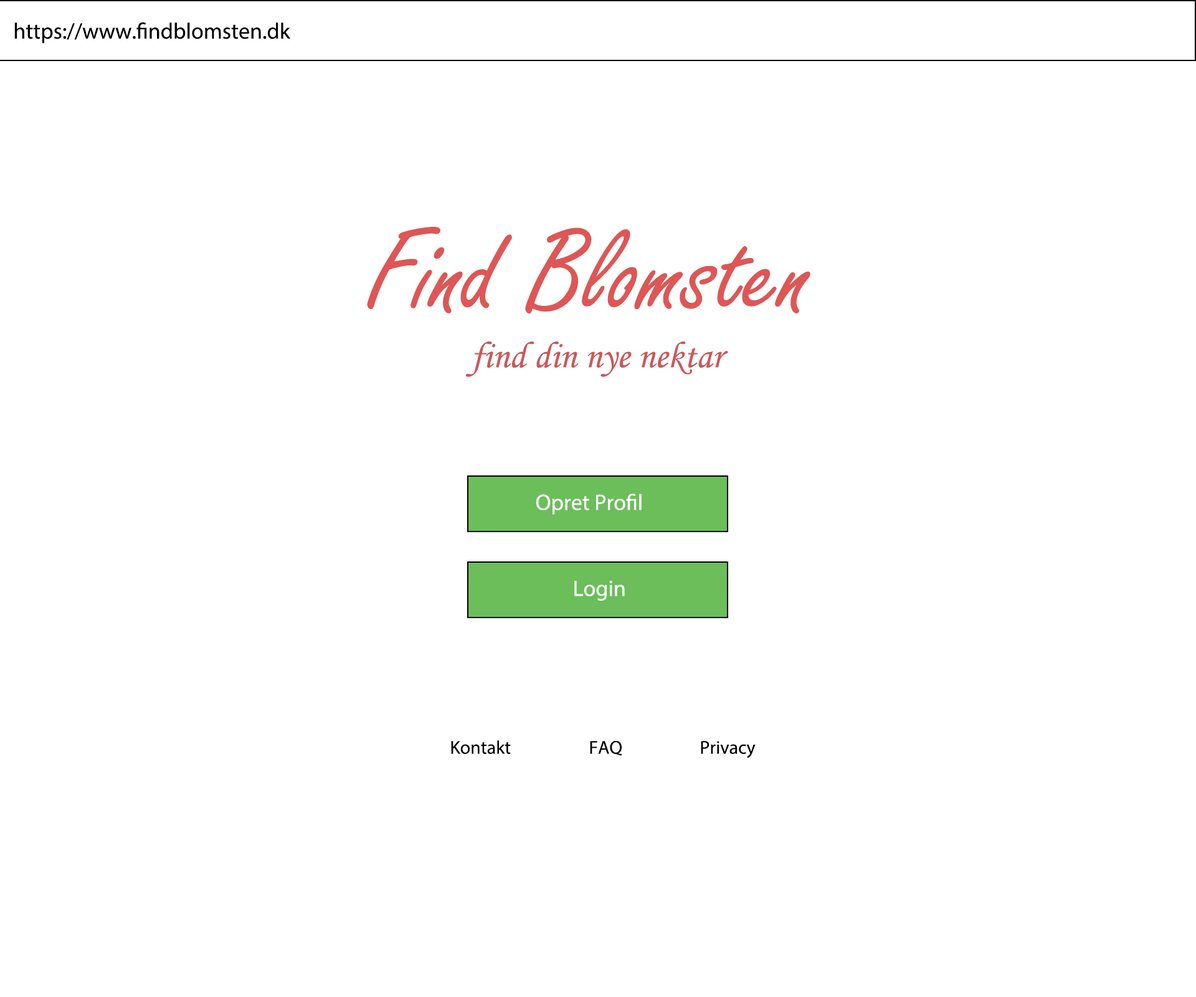
<style>
.page{position:relative;width:1196px;height:997px;background:#ffffff}
.page>*{position:absolute;margin:0}
.t1{font:22.4px "MyriadPro-Regular";color:#000000}
.t2{font:124.6px "FreestyleScript-Regular";color:#de5656}
.t3{font:37.4px "MonotypeCorsiva";color:#cd5757}
.t4{font:22.4px "MyriadPro-Regular";color:#ffffff}
.t5{font:18.7px "MyriadPro-Regular";color:#000000}
</style>
<div class="page">
<p class="t1" style="left:14px;top:22px;width:277px;height:22px">https://www.findblomsten.dk</p>
<p class="t2" style="left:367px;top:227px;width:444px;height:87px">Find Blomsten</p>
<p class="t3" style="left:465px;top:341px;width:263px;height:36px">find din nye nektar</p>
<p class="t4" style="left:536px;top:493px;width:106px;height:22px">Opret Profil</p>
<p class="t4" style="left:574px;top:581px;width:51px;height:20px">Login</p>
<p class="t5" style="left:451px;top:740px;width:60px;height:14px">Kontakt</p>
<p class="t5" style="left:590px;top:741px;width:32px;height:15px">FAQ</p>
<p class="t5" style="left:701px;top:741px;width:55px;height:17px">Privacy</p>
</div>
